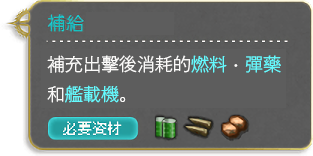
<style>
.page{position:relative;width:313px;height:156px;background:#5d5d5d}
.page>*{position:absolute;margin:0}
.t1{font:18px/30px "GothicMB101Pr6N-Light";color:#fbfaf9}
.t2{font:18px/30px "GothicMB101Pr6N-Light";color:#64fbff}
.t3{font:18px/30px "DFKaiShu-SB-Estd-BF";color:#fbfaf9}
</style>
<div class="page">
<p class="t1" style="left:47px;top:55px;width:234px;height:48px">補充出擊後消耗的<span class="t2">燃料</span><span class="t3">．</span><span class="t2">彈藥<br></span>和<span class="t2">艦載機</span>。</p>
</div>
